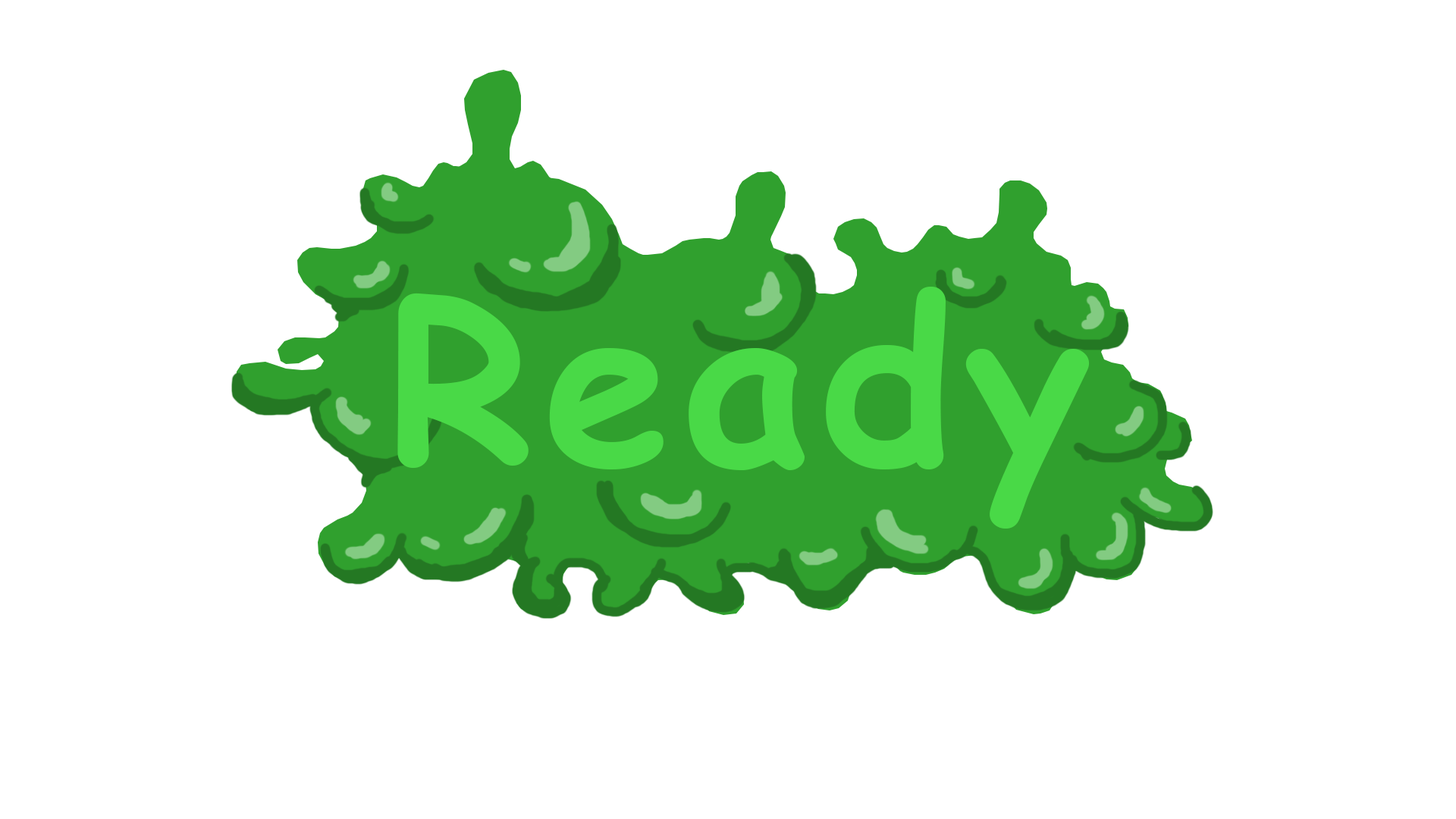
<style>
.page{position:relative;width:1456px;height:819px;background:#ffffff}
.page>*{position:absolute;margin:0}
.t1{font:227.5px "ComicSansMS-Bold";letter-spacing:0.05em;color:#49d947}
</style>
<div class="page">
<p class="t1" style="left:397px;top:287px;width:693px;height:242px">Ready</p>
</div>
